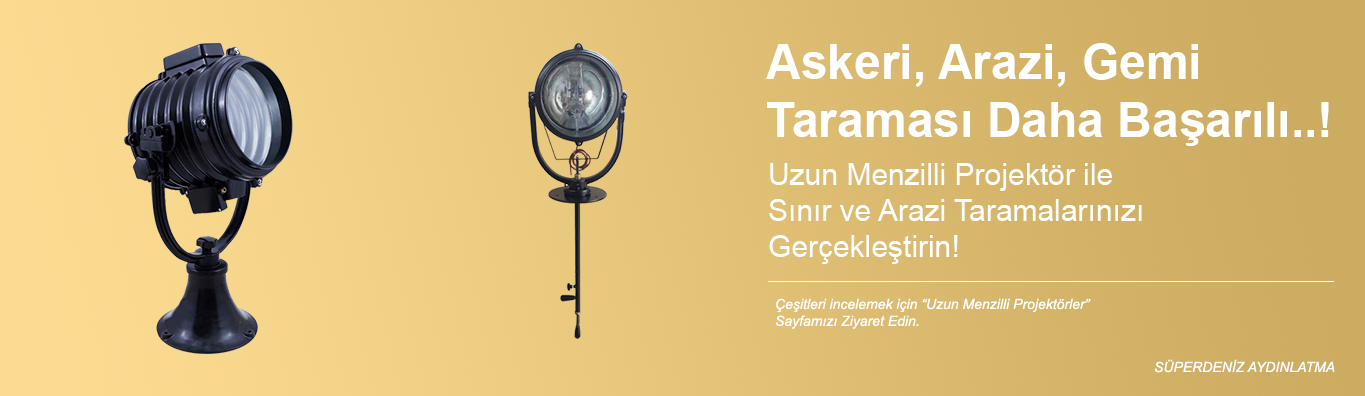
<style>
.page{position:relative;width:1365px;height:396px}
.page>*{position:absolute;margin:0}
.t1{font:48px "Arial-BoldMT";color:#ffffff}
.t2{font:30px "ArialMT";color:#ffffff}
.t3{font:14px "Arial-ItalicMT";color:#ffffff}
</style>
<div class="page">
<p class="t1" style="left:766px;top:43px;width:563px;height:103px">Askeri, Arazi, Gemi <br>Taraması Daha Başarılı..!</p>
<p class="t2" style="left:769px;top:163px;width:373px;height:101px">Uzun Menzilli Projektör ile <br>Sınır ve Arazi Taramalarınızı <br>Gerçekleştirin!</p>
<p class="t3" style="left:775px;top:298px;width:316px;height:31px">Çeşitleri incelemek için “Uzun Menzilli Projektörler”<br>Sayfamızı Ziyaret Edin.</p>
<p class="t3" style="left:1154px;top:359px;width:181px;height:14px">SÜPERDENİZ AYDINLATMA</p>
</div>
